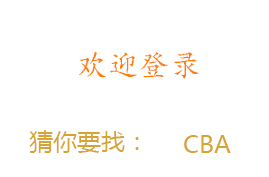
<style>
.page{position:relative;width:269px;height:177px;background:#ffffff}
.page>*{position:absolute;margin:0}
.t1{font:31px "¿¬Ìå";color:#ff7e00}
.t2{font:24px "MicrosoftYaHei";color:#d7a332}
</style>
<div class="page">
<p class="t1" style="left:79px;top:51px;width:120px;height:28px">欢迎登录</p>
<p class="t2" style="left:29px;top:130px;width:110px;height:23px">猜你要找：</p>
<p class="t2" style="left:184px;top:135px;width:47px;height:18px">CBA</p>
</div>
